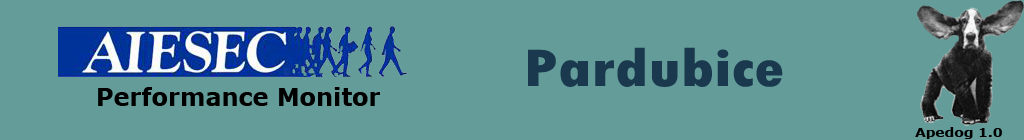
<style>
.page{position:relative;width:1024px;height:140px;background:#639c99}
.page>*{position:absolute;margin:0}
.t1{font:55.2px "TwCenMT-CondensedExtraBold";color:#1a394f;scale:1.26 1}
.t2{font:24px "Verdana-Bold";color:#000000}
.t3{font:12px "Verdana-Bold";color:#000000;scale:1.15 1}
</style>
<div class="page">
<p class="t1" style="left:528px;top:47px;width:255px;height:40px">Pardubice</p>
<p class="t2" style="left:98px;top:87px;width:282px;height:19px">Performance Monitor</p>
<p class="t3" style="left:915px;top:127px;width:87px;height:12px">Apedog 1.0</p>
</div>
